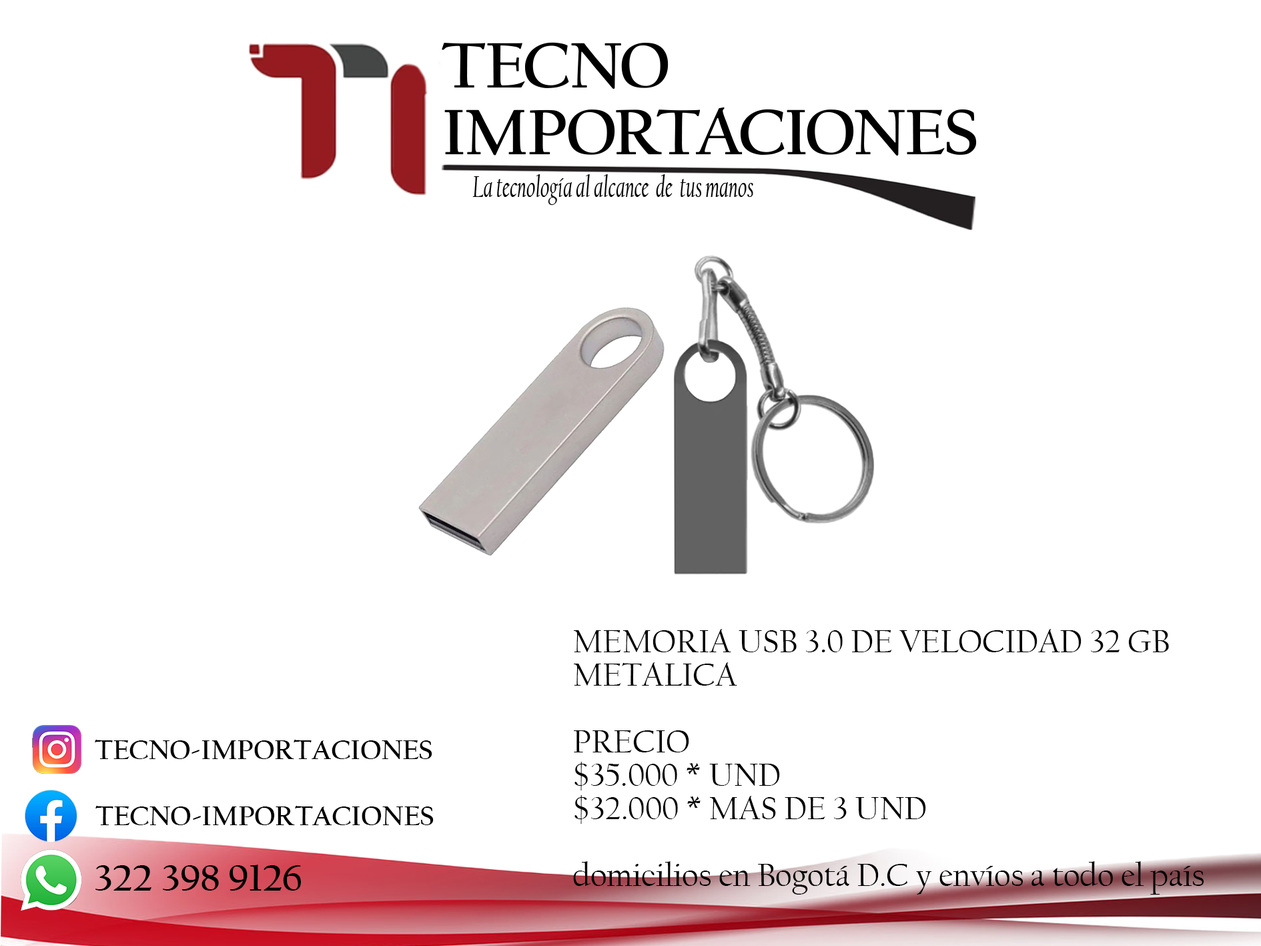
<style>
.page{position:relative;width:1261px;height:946px;background:#ffffff}
.page>*{position:absolute;margin:0}
.t1{font:33.4px/33.4px "CalifornianFB-Reg";letter-spacing:-0.005em;color:#000000}
.t2{font:27.8px "CalifornianFB-Bold";letter-spacing:-0.005em;color:#000000}
.t3{font:38.9px "CalifornianFB-Bold";letter-spacing:-0.005em;color:#000000}
</style>
<div class="page">
<p class="t1" style="left:573px;top:629px;width:631px;height:265px">MEMORIA USB 3.0 DE VELOCIDAD 32 GB <br>METALICA <br><br>PRECIO<br>$35.000 * UND<br>$32.000 * MAS DE 3 UND<br><br>domicilios en Bogotá D.C y envíos a todo el país</p>
<p class="t2" style="left:95px;top:739px;width:337px;height:20px">TECNO-IMPORTACIONES</p>
<p class="t2" style="left:95px;top:805px;width:339px;height:20px">TECNO-IMPORTACIONES</p>
<p class="t3" style="left:95px;top:864px;width:206px;height:26px">322 398 9126</p>
</div>
